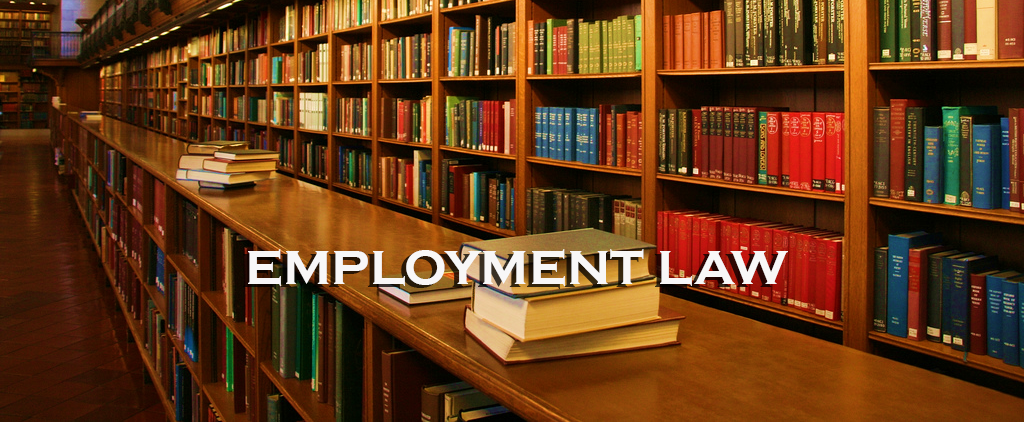
<style>
.page{position:relative;width:1024px;height:422px}
.page>*{position:absolute;margin:0}
.t1{font:50px "CopperplateGothic-Bold";color:#f8f7f7}
</style>
<div class="page">
<p class="t1" style="left:248px;top:249px;width:540px;height:37px">EMPLOYMENT LAW</p>
</div>
